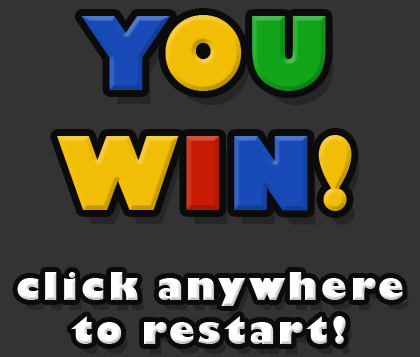
<style>
.page{position:relative;width:420px;height:357px;background:#333333}
.page>*{position:absolute;margin:0}
.t1{font:99.3px "GillSans-UltraBold";color:#184bb8}
.t2{font:99.3px "GillSans-UltraBold";color:#f2bd06}
.t3{font:99.3px "GillSans-UltraBold";color:#12a51a}
.t4{font:99.3px "GillSans-UltraBold";color:#c81c04}
.t5{font:36.6px "GillSans-UltraBold";letter-spacing:0.1em;color:#ffffff}
</style>
<div class="page">
<p class="t1" style="left:57px;top:15px;width:295px;height:196px;text-align:center">Y<span class="t2">O</span><span class="t3">U<br></span><span class="t2">W</span><span class="t4">I</span>N<span class="t2">!</span></p>
<p class="t5" style="left:17px;top:272px;width:386px;height:72px;text-align:center">click anywhere<br>to restart!</p>
</div>
